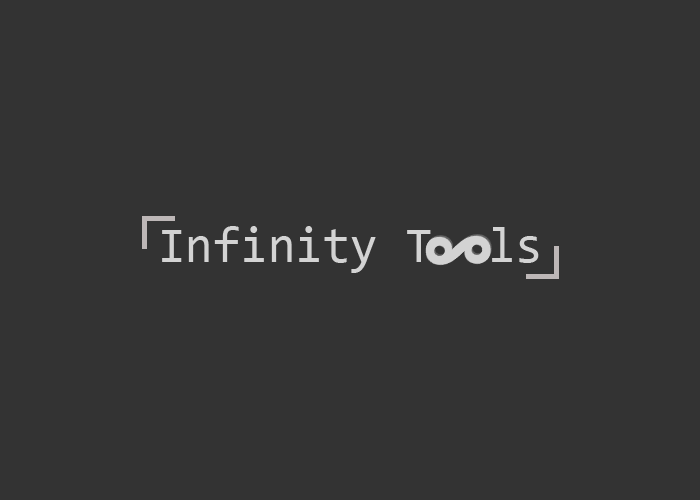
<style>
.page{position:relative;width:700px;height:500px;background:#333333}
.page>*{position:absolute;margin:0}
.t1{font:50px "Consolas";color:#d3d3d3}
</style>
<div class="page">
<p class="t1" style="left:162px;top:226px;width:377px;height:47px">Infinity T  ls</p>
</div>
